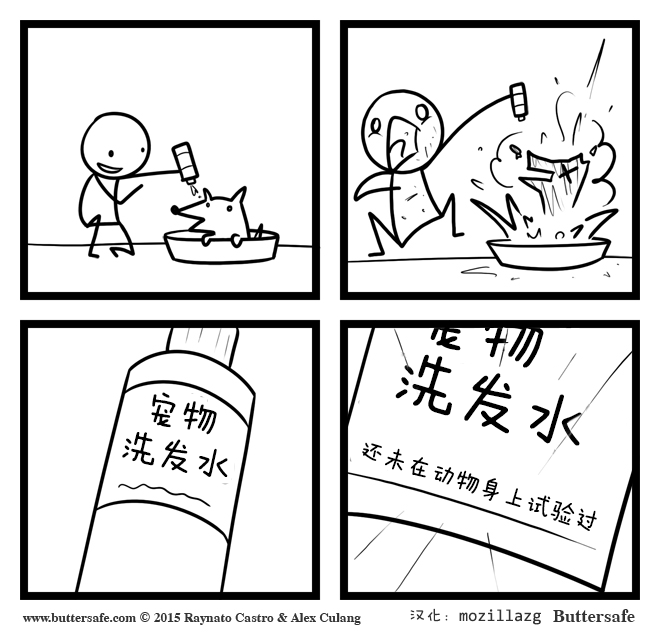
<style>
.page{position:relative;width:660px;height:640px;background:#ffffff}
.page>*{position:absolute;margin:0}
.t1{font:66.7px/66.7px "FZMWJW--GB1-0";color:#000000}
.t2{font:37.5px/41.7px "FZMWJW--GB1-0";color:#000000}
.t3{font:25px "FZMWJW--GB1-0";color:#000000}
.t4{font:16.7px "YaHei-Consolas-Hybrid";color:#333333}
.t5{font:16.7px "FZMWJW--GB1-0";color:#333333}
</style>
<div class="page">
<p class="t1" style="left:395px;top:288px;width:187px;height:158px;rotate:16deg">宠物<br>洗发水</p>
<p class="t2" style="left:122px;top:392px;width:106px;height:85px;rotate:12deg">宠物<br>洗发水</p>
<p class="t3" style="left:362px;top:442px;width:235px;height:89px;rotate:17deg">还未在动物身上试验过</p>
<p class="t4" style="left:410px;top:608px;width:131px;height:17px"><span class="t5">汉化：</span>mozillazg</p>
</div>
